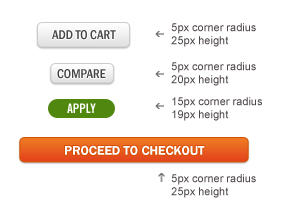
<style>
.page{position:relative;width:283px;height:223px;background:#ffffff}
.page>*{position:absolute;margin:0}
.t1{font:13px "FranklinGothic-MediumCond";color:#444444;text-transform:uppercase}
.t2{font:11px/16px "ArialMT";color:#504949}
.t3{font:11px/13px "ArialMT";color:#504949}
.t4{font:11px/26px "ArialMT";color:#504949}
.t5{font:11px/22px "ArialMT";color:#504949}
.t6{font:11px/25px "ArialMT";color:#504949}
.t7{font:13px "TradeGothic-BoldCondTwenty";color:#ffffff;text-transform:uppercase}
.t8{font:13px "FranklinGothic-Demi";color:#ffffff;text-transform:uppercase}
</style>
<div class="page">
<p class="t1" style="left:52px;top:30px;width:64px;height:10px">Add to Cart</p>
<p class="t2" style="left:171px;top:23px;width:91px;height:175px">5px corner radius<br><span class="t3">25px height<br></span><span class="t4">5px corner radius<br></span><span class="t3">20px height<br></span><span class="t5">15px </span>corner <span class="t5">radius<br></span><span class="t3">19px height<br><br><br><br></span><span class="t6">5px corner radius<br></span><span class="t3">25px height</span></p>
<p class="t1" style="left:57px;top:69px;width:49px;height:10px">Compare</p>
<p class="t7" style="left:67px;top:103px;width:29px;height:10px">Apply</p>
<p class="t8" style="left:65px;top:145px;width:140px;height:10px">Proceed to Checkout</p>
</div>
